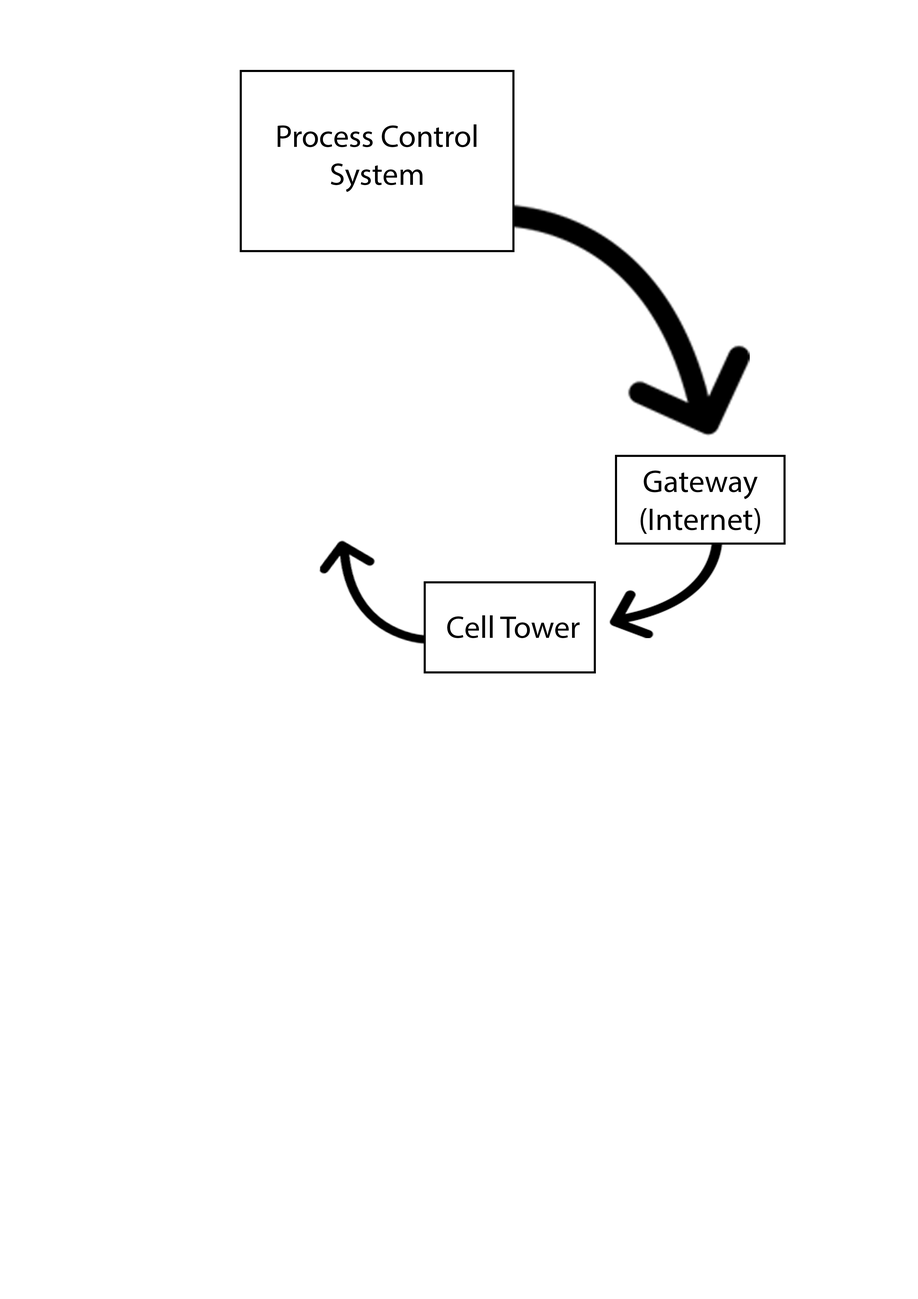
<style>
.page{position:relative;width:918px;height:1299px;background:#ffffff}
.page>*{position:absolute;margin:0}
.t1{font:31.6px "MyriadPro-Regular";color:#000000}
</style>
<div class="page">
<p class="t1" style="left:278px;top:124px;width:199px;height:68px;text-align:center">Process Control System</p>
<p class="t1" style="left:641px;top:470px;width:119px;height:64px;text-align:center">Gateway<br>(Internet)</p>
<p class="t1" style="left:447px;top:615px;width:133px;height:23px">Cell Tower</p>
</div>
